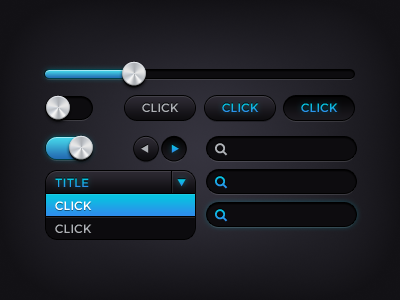
<style>
.page{position:relative;width:400px;height:300px}
.page>*{position:absolute;margin:0}
.t1{font:12px "Montserrat-Regular";letter-spacing:-0.01em;color:#aeb1b6}
.t2{font:12px "Montserrat-Regular";letter-spacing:-0.01em}
.t3{font:12px "Montserrat-Regular";letter-spacing:-0.01em;color:#eaeaea}
</style>
<div class="page">
<p class="t1" style="left:142px;top:103px;width:37px;height:9px">CLICK</p>
<p class="t2" style="left:222px;top:103px;width:37px;height:9px">CLICK</p>
<p class="t2" style="left:301px;top:103px;width:37px;height:9px">CLICK</p>
<p class="t2" style="left:55px;top:178px;width:34px;height:9px">TITLE</p>
<p class="t3" style="left:55px;top:201px;width:37px;height:9px">CLICK</p>
<p class="t1" style="left:55px;top:224px;width:37px;height:9px">CLICK</p>
</div>
